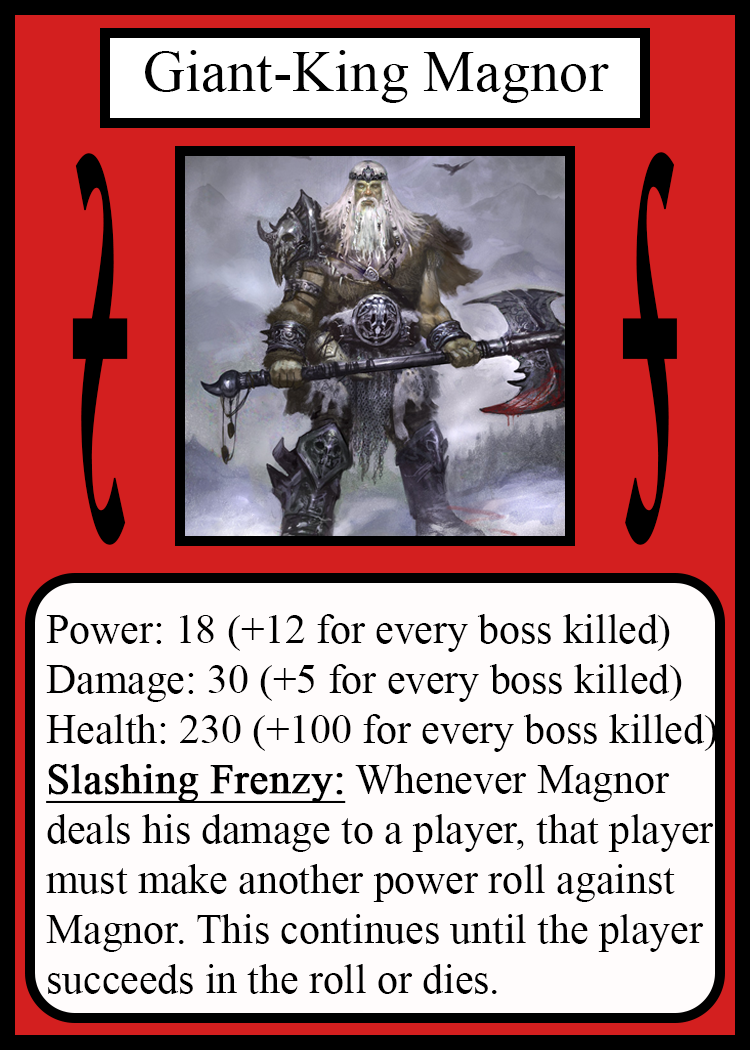
<style>
.page{position:relative;width:750px;height:1050px;background:#fffcfc}
.page>*{position:absolute;margin:0}
.t1{font:58.3px "TimesNewRomanPSMT";color:#010101}
.t2{font:814.3px "Apple-Chancery";color:#000000;font-weight:bold;scale:0.17 1}
.t3{font:814.6px "Apple-Chancery";color:#000000;font-weight:bold;scale:0.17 1}
.t4{font:41.7px "TimesNewRomanPSMT";color:#000000}
.t5{font:41.7px "TimesNewRomanPSMT";color:#000000;font-weight:bold;text-decoration:underline}
</style>
<div class="page">
<p class="t1" style="left:145px;top:50px;width:464px;height:53px">Giant-King Magnor</p>
<p class="t2" style="left:72px;top:153px;width:56px;height:392px;rotate:180deg">s</p>
<p class="t3" style="left:622px;top:152px;width:55px;height:393px">s</p>
<p class="t4" style="left:46px;top:614px;width:671px;height:380px">Power: 18 (+12 for every boss killed)<br>Damage: 30 (+5 for every boss killed)<br>Health: 230 (+100 for every boss killed)<br><span class="t5">Slashing Frenzy:</span> Whenever Magnor<br>deals his damage to a player, that player<br>must make another power roll against<br>Magnor. This continues until the player<br>succeeds in the roll or dies.</p>
</div>
